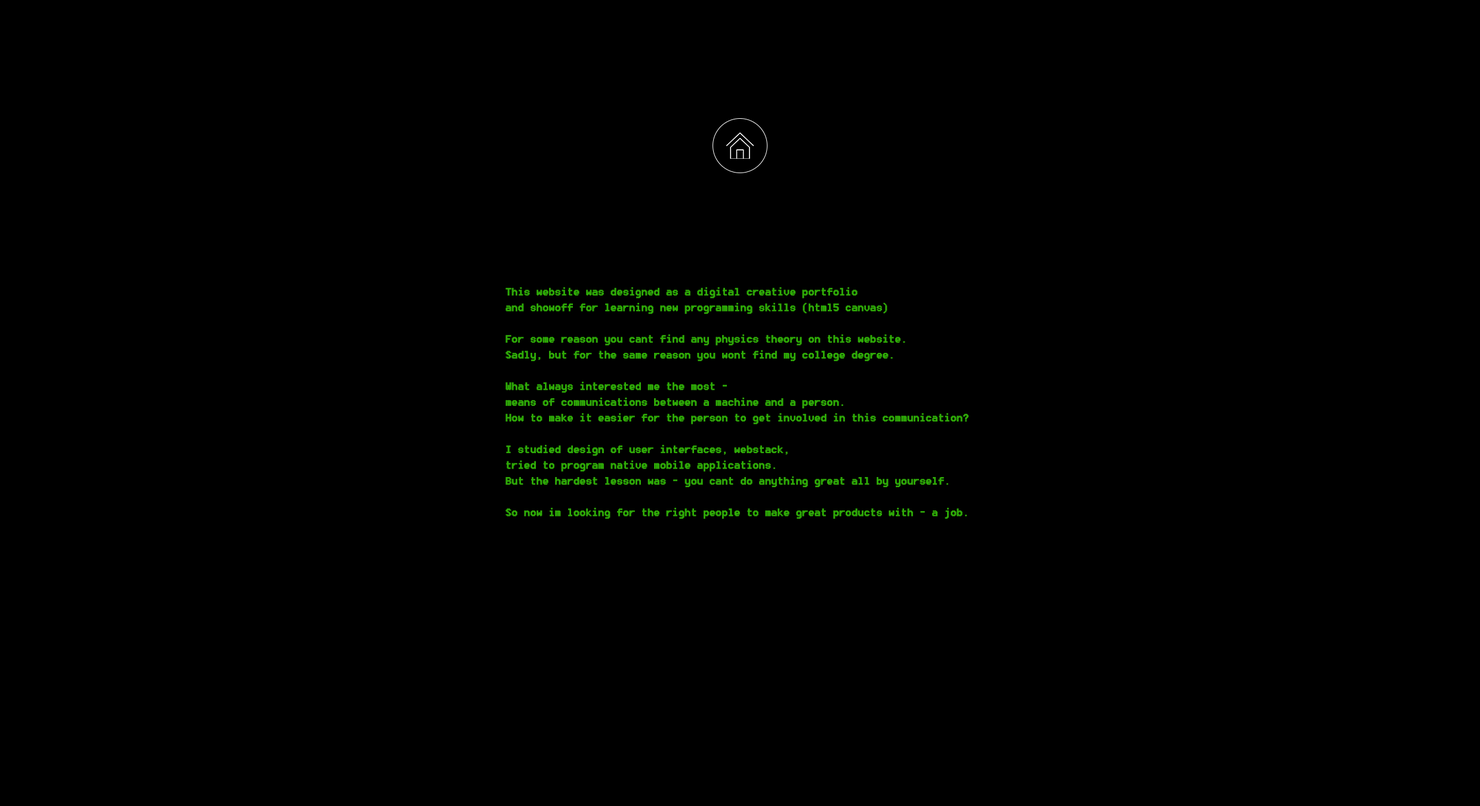
<style>
.page{position:relative;width:1480px;height:806px;background:#000000}
.page>*{position:absolute;margin:0}
.t1{font:13.1px "Terminal";color:#2eaa07;font-weight:bold}
</style>
<div class="page">
<p class="t1" style="left:505px;top:287px;width:464px;height:232px">This website was designed as a digital creative portfolio <br>and showoff for learning new programming skills (html5 canvas)<br><br>For some reason you cant find any physics theory on this website. <br>Sadly, but for the same reason you wont find my college degree.<br><br>What always interested me the most - <br>means of communications between a machine and a person. <br>How to make it easier for the person to get involved in this communication?<br><br>I studied design of user interfaces, webstack, <br>tried to program native mobile applications.<br>But the hardest lesson was - you cant do anything great all by yourself.<br><br>So now im looking for the right people to make great products with - a job.</p>
</div>
